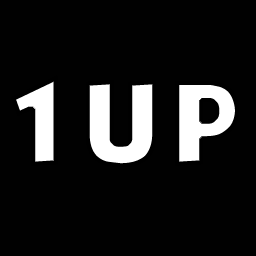
<style>
.page{position:relative;width:256px;height:256px;background:#010101}
.page>*{position:absolute;margin:0}
.t1{font:120px "Boulder-Regular";letter-spacing:0.075em}
</style>
<div class="page">
<p class="t1" style="left:10px;top:75px;width:229px;height:93px">1UP</p>
</div>
